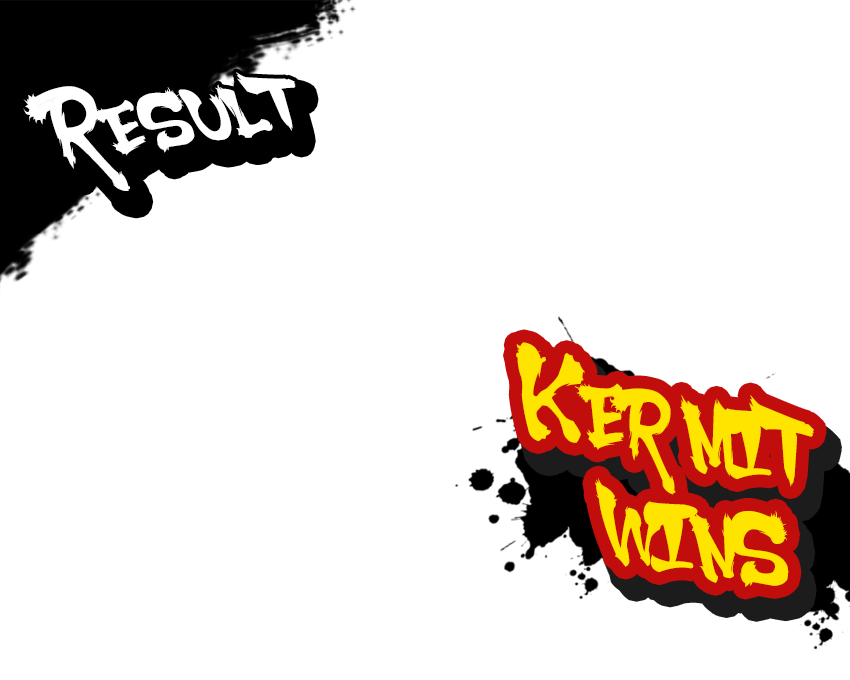
<style>
.page{position:relative;width:850px;height:680px;background:#ffffff}
.page>*{position:absolute;margin:0}
.t1{font:70.1px "SSF4-ABUKET-Regular";color:#ffffff;font-variant:small-caps}
.t2{font:70.1px "SSF4-ABUKET-Regular";letter-spacing:-0.24em;color:#ffffff;font-variant:small-caps}
.t3{font:70.1px "SSF4-ABUKET-Regular";letter-spacing:0.16em;color:#ffffff;font-variant:small-caps;scale:1.13 1}
.t4{font:70.1px "SSF4-ABUKET-Regular";letter-spacing:0.2em;color:#ffffff;font-variant:small-caps}
.t5{font:87.6px "SSF4-ABUKET-Regular";color:#ffe400;font-variant:small-caps}
</style>
<div class="page">
<p class="t1" style="left:23px;top:72px;width:273px;height:119px;rotate:-9deg"><span class="t2">R</span><span class="t3">e</span>sul<span class="t4">t</span></p>
<p class="t5" style="left:516px;top:342px;width:298px;height:245px;text-align:right;rotate:10deg">Kermit<br>wins</p>
</div>
